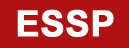
<style>
.page{position:relative;width:129px;height:48px;background:#b01111}
.page>*{position:absolute;margin:0}
.t1{font:36px "Arial-BoldMT";color:#ffffff;text-transform:uppercase;font-weight:bold}
</style>
<div class="page">
<p class="t1" style="left:17px;top:9px;width:97px;height:28px">ESSP</p>
</div>
